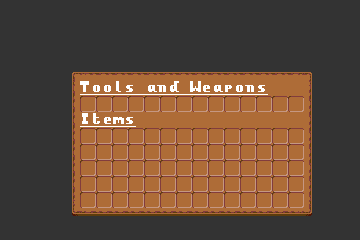
<style>
.page{position:relative;width:360px;height:240px;background:#333333}
.page>*{position:absolute;margin:0}
.t1{font:11px "Blue-Sky-8x8-Monospaced";letter-spacing:-0.1em;color:#ffffff;text-decoration:underline}
</style>
<div class="page">
<p class="t1" style="left:80px;top:81px;width:188px;height:14px">Tools and Weapons</p>
<p class="t1" style="left:80px;top:113px;width:56px;height:14px">Items</p>
</div>
